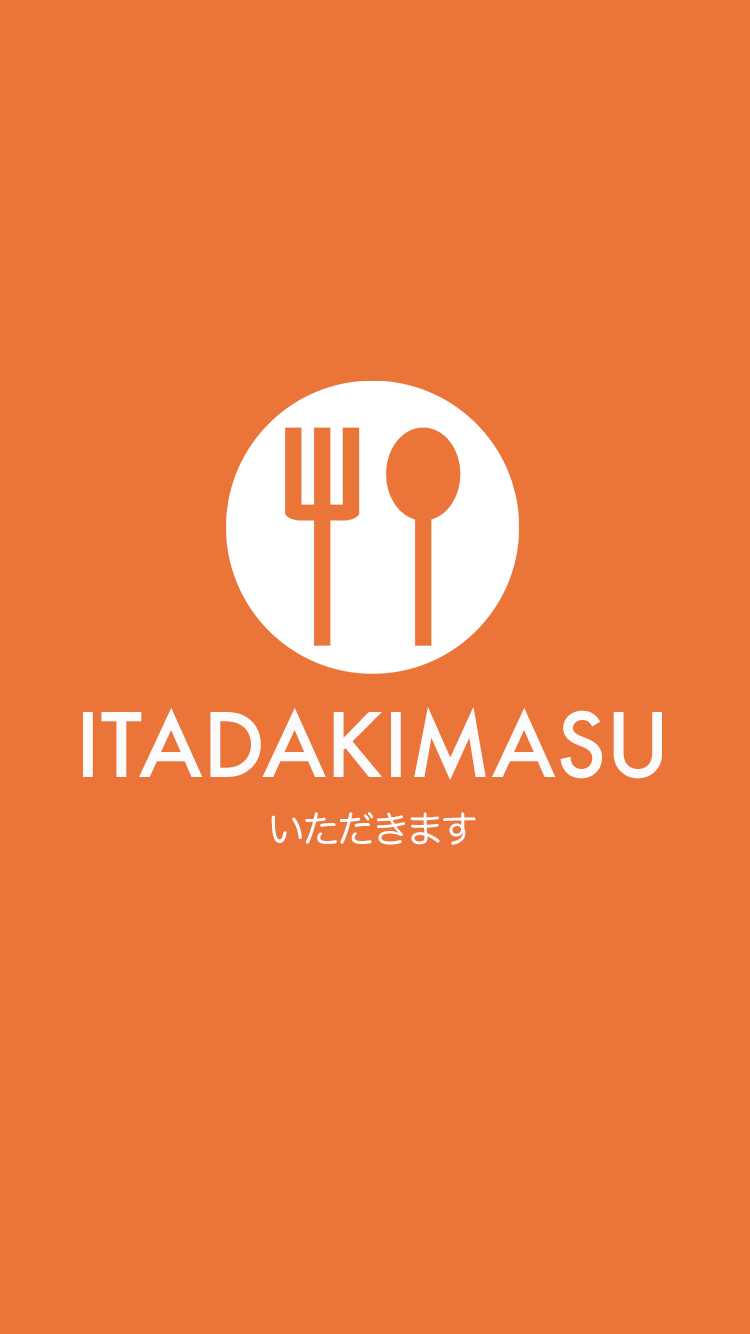
<style>
.page{position:relative;width:750px;height:1334px;background:#eb7439}
.page>*{position:absolute;margin:0}
.t1{font:86.3px "Futura-Medium";color:#fbfbfb}
.t2{font:37px "HiraMaruPro-W4";color:#fbfbfb}
</style>
<div class="page">
<p class="t1" style="left:83px;top:707px;width:579px;height:73px">ITADAKIMASU</p>
<p class="t2" style="left:271px;top:812px;width:205px;height:33px">いただきます</p>
</div>
